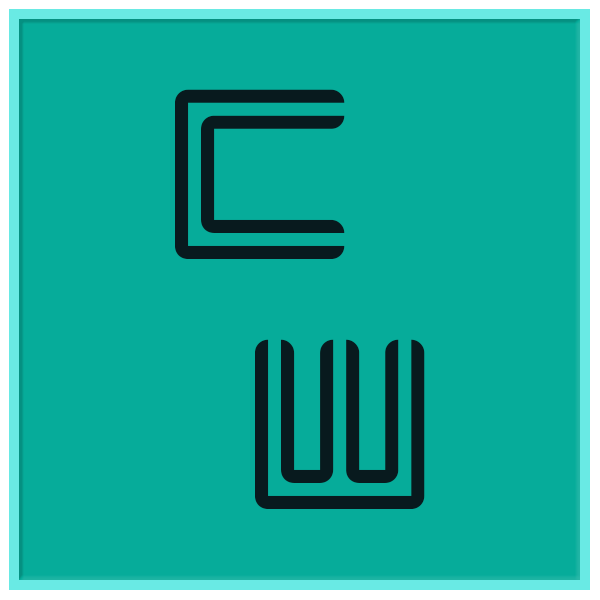
<style>
.page{position:relative;width:600px;height:600px;background:#06ac9a}
.page>*{position:absolute;margin:0}
.t1{font:208.3px/100px "Liner";letter-spacing:0.01em;color:#081a1e}
</style>
<div class="page">
<p class="t1" style="left:175px;top:89px;width:250px;height:420px;text-align:center">C<br><br>  W</p>
</div>
